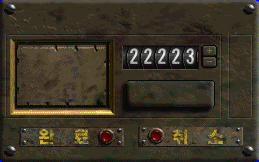
<style>
.page{position:relative;width:259px;height:162px;background:#383020}
.page>*{position:absolute;margin:0}
.t1{font:17px "HakgyoansimPosterB"}
</style>
<div class="page">
<p class="t1" style="left:39px;top:128px;width:50px;height:17px">완     료</p>
<p class="t1" style="left:173px;top:128px;width:50px;height:17px">취     소</p>
</div>
